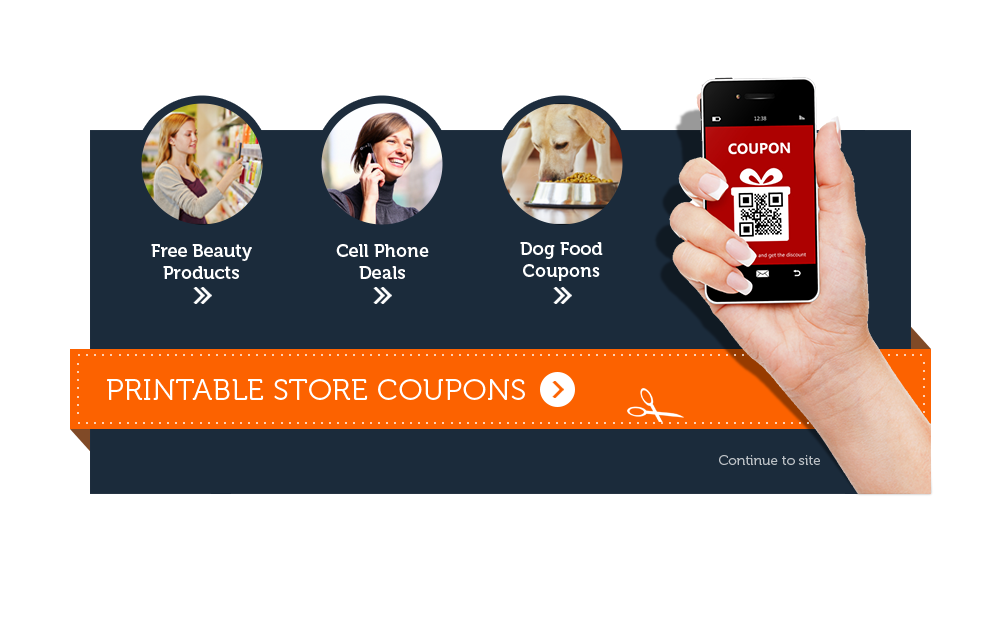
<style>
.page{position:relative;width:1000px;height:632px;background:#ffffff}
.page>*{position:absolute;margin:0}
.t1{font:18px "Museo-700";color:#ffffff}
.t2{font:20px "Gotham-Medium";letter-spacing:0.14em;color:#fed0b3}
.t3{font:30px "Museo-300";letter-spacing:0.02em;color:#ffffff}
.t4{font:14px "Museo-300";color:#bbc0c5}
</style>
<div class="page">
<p class="t1" style="left:151px;top:244px;width:101px;height:35px;text-align:center">Free Beauty<br>Products</p>
<p class="t1" style="left:336px;top:244px;width:93px;height:35px;text-align:center">Cell Phone<br>Deals</p>
<p class="t1" style="left:520px;top:242px;width:83px;height:39px;text-align:center">Dog Food<br>Coupons</p>
<p class="t2" style="left:77px;top:363px;width:2px;height:51px;rotate:-90deg">.......</p>
<p class="t2" style="left:78px;top:354px;width:844px;height:2px">.........................................................................................................</p>
<p class="t2" style="left:923px;top:362px;width:2px;height:51px;rotate:-90deg">.......</p>
<p class="t3" style="left:107px;top:379px;width:418px;height:21px">PRINTABLE STORE COUPONS</p>
<p class="t2" style="left:78px;top:422px;width:844px;height:2px">.........................................................................................................</p>
<p class="t4" style="left:719px;top:455px;width:101px;height:10px">Continue to site</p>
</div>
